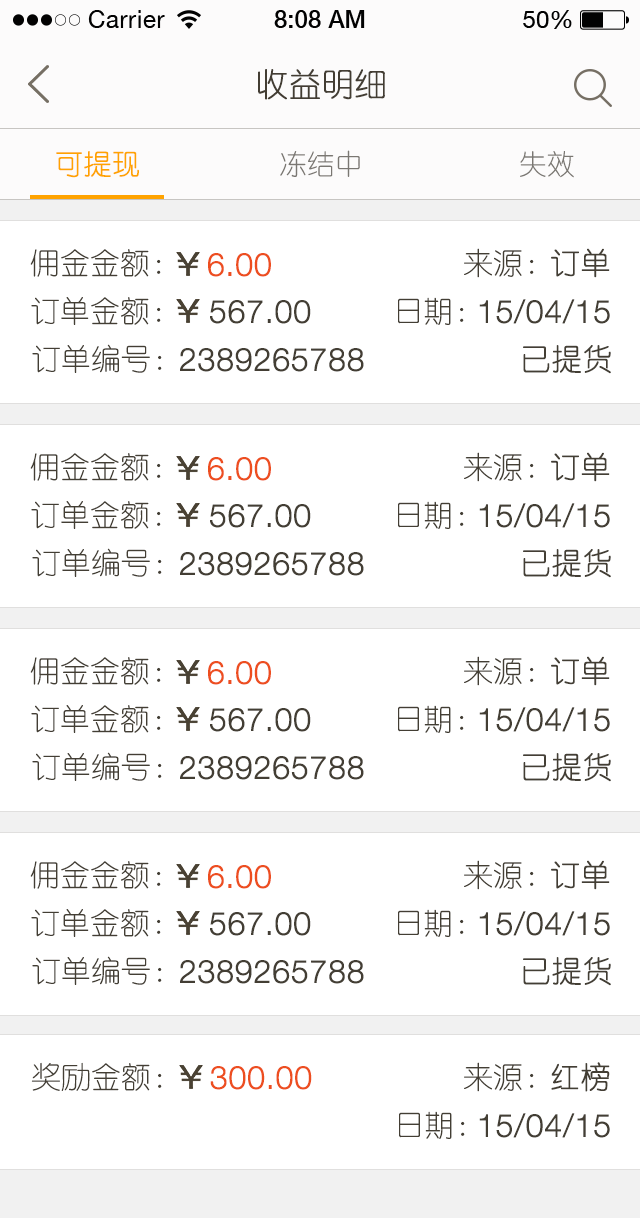
<style>
.page{position:relative;width:640px;height:1218px;background:#ffffff}
.page>*{position:absolute;margin:0}
.t1{font:32px "YouYuan";color:#433d33;text-transform:uppercase;font-weight:bold}
.t2{font:28px "YouYuan";color:#7a7772;text-transform:uppercase}
.t3{font:28px "YouYuan";color:#ffa300;text-transform:uppercase;font-weight:bold}
.t4{font:30px "YouYuan";color:#433e34;text-transform:uppercase}
.t5{font:32px "HelveticaNeueLTPro-Lt";color:#ed4e1f;text-transform:uppercase;font-weight:bold}
.t6{font:30px "YouYuan";color:#433e34;text-transform:uppercase;font-weight:bold}
.t7{font:32px "HelveticaNeueLTPro-Lt";color:#433e34;text-transform:uppercase;font-weight:bold}
</style>
<div class="page">
<p class="t1" style="left:258px;top:69px;width:127px;height:31px">收益明细</p>
<p class="t2" style="left:280px;top:150px;width:80px;height:27px">冻结中</p>
<p class="t3" style="left:56px;top:151px;width:83px;height:27px">可提现</p>
<p class="t2" style="left:520px;top:151px;width:54px;height:27px">失效</p>
<p class="t4" style="left:30px;top:249px;width:131px;height:28px">佣金金额：</p>
<p class="t5" style="left:208px;top:253px;width:63px;height:24px">6.00</p>
<p class="t4" style="left:464px;top:248px;width:70px;height:30px">来源：</p>
<p class="t6" style="left:551px;top:248px;width:59px;height:30px">订单</p>
<p class="t4" style="left:31px;top:297px;width:130px;height:28px">订单金额：</p>
<p class="t7" style="left:210px;top:300px;width:101px;height:24px">567.00</p>
<p class="t4" style="left:398px;top:297px;width:66px;height:28px">日期：</p>
<p class="t7" style="left:479px;top:299px;width:131px;height:25px">15/04/15</p>
<p class="t4" style="left:32px;top:344px;width:130px;height:29px">订单编号：</p>
<p class="t7" style="left:180px;top:348px;width:184px;height:24px">2389265788</p>
<p class="t6" style="left:523px;top:345px;width:88px;height:29px">已提货</p>
<p class="t4" style="left:30px;top:453px;width:131px;height:28px">佣金金额：</p>
<p class="t5" style="left:208px;top:457px;width:63px;height:24px">6.00</p>
<p class="t4" style="left:464px;top:452px;width:70px;height:30px">来源：</p>
<p class="t6" style="left:551px;top:452px;width:59px;height:30px">订单</p>
<p class="t4" style="left:31px;top:501px;width:130px;height:28px">订单金额：</p>
<p class="t7" style="left:210px;top:504px;width:101px;height:24px">567.00</p>
<p class="t4" style="left:398px;top:501px;width:66px;height:28px">日期：</p>
<p class="t7" style="left:479px;top:503px;width:131px;height:25px">15/04/15</p>
<p class="t4" style="left:32px;top:548px;width:130px;height:29px">订单编号：</p>
<p class="t7" style="left:180px;top:552px;width:184px;height:24px">2389265788</p>
<p class="t6" style="left:523px;top:549px;width:88px;height:29px">已提货</p>
<p class="t4" style="left:30px;top:657px;width:131px;height:28px">佣金金额：</p>
<p class="t5" style="left:208px;top:661px;width:63px;height:24px">6.00</p>
<p class="t4" style="left:464px;top:656px;width:70px;height:30px">来源：</p>
<p class="t6" style="left:551px;top:656px;width:59px;height:30px">订单</p>
<p class="t4" style="left:31px;top:705px;width:130px;height:28px">订单金额：</p>
<p class="t7" style="left:210px;top:708px;width:101px;height:24px">567.00</p>
<p class="t4" style="left:398px;top:705px;width:66px;height:28px">日期：</p>
<p class="t7" style="left:479px;top:707px;width:131px;height:25px">15/04/15</p>
<p class="t4" style="left:32px;top:752px;width:130px;height:29px">订单编号：</p>
<p class="t7" style="left:180px;top:756px;width:184px;height:24px">2389265788</p>
<p class="t6" style="left:523px;top:753px;width:88px;height:29px">已提货</p>
<p class="t4" style="left:30px;top:861px;width:131px;height:28px">佣金金额：</p>
<p class="t5" style="left:208px;top:865px;width:63px;height:24px">6.00</p>
<p class="t4" style="left:464px;top:860px;width:70px;height:30px">来源：</p>
<p class="t6" style="left:551px;top:860px;width:59px;height:30px">订单</p>
<p class="t4" style="left:31px;top:909px;width:130px;height:28px">订单金额：</p>
<p class="t7" style="left:210px;top:912px;width:101px;height:24px">567.00</p>
<p class="t4" style="left:398px;top:909px;width:66px;height:28px">日期：</p>
<p class="t7" style="left:479px;top:911px;width:131px;height:25px">15/04/15</p>
<p class="t4" style="left:32px;top:956px;width:130px;height:29px">订单编号：</p>
<p class="t7" style="left:180px;top:960px;width:184px;height:24px">2389265788</p>
<p class="t6" style="left:523px;top:957px;width:88px;height:29px">已提货</p>
<p class="t4" style="left:31px;top:1062px;width:131px;height:29px">奖励金额：</p>
<p class="t4" style="left:464px;top:1062px;width:70px;height:30px">来源：</p>
<p class="t6" style="left:551px;top:1062px;width:59px;height:30px">红榜</p>
<p class="t5" style="left:210px;top:1066px;width:102px;height:24px">300.00</p>
<p class="t4" style="left:399px;top:1111px;width:66px;height:28px">日期：</p>
<p class="t7" style="left:479px;top:1113px;width:131px;height:25px">15/04/15</p>
</div>
